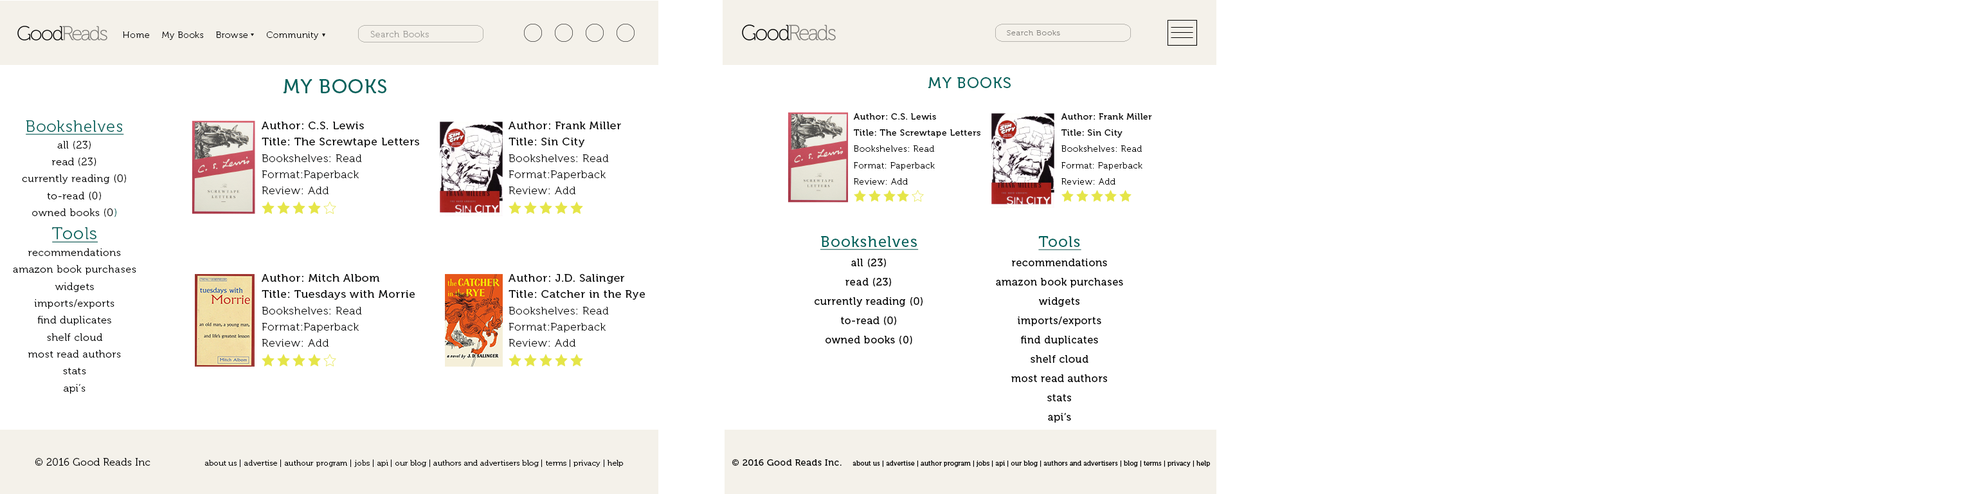
<style>
.page{position:relative;width:1975px;height:494px;background:#ffffff}
.page>*{position:absolute;margin:0}
.t1{font:9px "Museo-100";letter-spacing:0.05em;color:#000000}
.t2{font:9px "Museo-100";letter-spacing:0.05em;color:#9b9995}
.t3{font:7.2px "Museo-100";letter-spacing:0.05em;color:#84827e;scale:1.14 1}
.t4{font:15.4px "Museo-500";letter-spacing:0.05em;color:#00635d}
.t5{font:19.3px "Museo-500";letter-spacing:0.05em;color:#00635d}
.t6{font:8.9px/16.3px "Museo-500";letter-spacing:0.05em;color:#000000}
.t7{font:8.9px/16.3px "Museo-100";letter-spacing:0.05em;color:#000000}
.t8{font:10.1px/16.9px "Museo-300";letter-spacing:0.05em;color:#000000}
.t9{font:15.8px/24.8px "Museo-300";letter-spacing:0.05em;color:#00635d;text-decoration:underline}
.t10{font:10.1px/16.9px "Museo-300";letter-spacing:0.05em;color:#00635d}
.t11{font:11px/16.1px "Museo-500";letter-spacing:0.05em;color:#000101}
.t12{font:11px/16.1px "Museo-100";letter-spacing:0.05em;color:#000101}
.t13{font:11px/16.1px "Museo-100";letter-spacing:0.05em;color:#000000}
.t14{font:11px/16.1px "Museo-500";letter-spacing:0.05em;color:#000000}
.t15{font:10.1px/16.9px "Museo-300";letter-spacing:0.05em;color:#000101}
.t16{font:16.9px/24.8px "Museo-300";letter-spacing:0.05em;color:#00635d;text-decoration:underline}
.t17{font:10.3px/19.3px "Museo-500";letter-spacing:0.05em;color:#000000}
.t18{font:15.4px/28.3px "Museo-500";letter-spacing:0.05em;color:#00635d;text-decoration:underline}
.t19{font:7.7px "Museo-300";letter-spacing:0.025em;color:#000000}
.t20{font:10.3px "Museo-300";letter-spacing:0.025em;color:#000000}
.t21{font:9px "Museo-500";letter-spacing:0.05em;color:#000000}
.t22{font:6.4px "Museo-500";letter-spacing:0.025em;color:#000000}
</style>
<div class="page">
<p class="t1" style="left:123px;top:32px;width:27px;height:6px">Home</p>
<p class="t1" style="left:161px;top:32px;width:43px;height:8px">My Books</p>
<p class="t1" style="left:216px;top:32px;width:32px;height:6px">Browse</p>
<p class="t1" style="left:266px;top:32px;width:53px;height:8px">Community</p>
<p class="t2" style="left:370px;top:31px;width:59px;height:6px">Search Books</p>
<p class="t3" style="left:1007px;top:30px;width:53px;height:5px">Search Books</p>
<p class="t4" style="left:928px;top:77px;width:83px;height:11px">MY BOOKS</p>
<p class="t5" style="left:284px;top:79px;width:102px;height:14px">MY BOOKS</p>
<p class="t6" style="left:853px;top:113px;width:127px;height:71px">Author: C.S. Lewis<br>Title: The Screwtape Letters<br><span class="t7">Bookshelves: Read<br>Format: Paperback<br>Review: Add</span></p>
<p class="t7" style="left:1061px;top:113px;width:91px;height:71px"><span class="t6">Author: Frank Miller<br>Title: Sin City<br></span>Bookshelves: Read<br>Format: Paperback<br>Review: Add</p>
<p class="t8" style="left:22px;top:120px;width:104px;height:97px;text-align:center"><span class="t9">Bookshelves<br></span>all (23)<br>read (23)<br>currently reading (0)<br>to-read (0)<br>owned books (0<span class="t10">)</span></p>
<p class="t11" style="left:262px;top:122px;width:157px;height:72px">Author: C.S. Lewis<br>Title: The Screwtape Letters<br><span class="t12">Bookshelves: Read<br>Format:Paperback<br>Review: Add</span></p>
<p class="t13" style="left:509px;top:122px;width:112px;height:72px"><span class="t14">Author: Frank Miller<br>Title: Sin City<br></span>Bookshelves: Read<br>Format:Paperback<br>Review: Add</p>
<p class="t15" style="left:13px;top:227px;width:123px;height:166px;text-align:center"><span class="t16">Tools<br></span>recommendations<br>amazon book purchases<br>widgets<br>imports/exports<br>find duplicates<br>shelf cloud<br>most read authors<br>stats<br>api’s</p>
<p class="t17" style="left:815px;top:236px;width:108px;height:109px;text-align:center"><span class="t18">Bookshelves<br></span>all (23)<br>read (23)<br>currently reading (0)<br>to-read (0)<br>owned books (0)</p>
<p class="t17" style="left:996px;top:236px;width:127px;height:186px;text-align:center"><span class="t18">Tools<br></span>recommendations<br>amazon book purchases<br>widgets<br>imports/exports<br>find duplicates<br>shelf cloud<br>most read authors<br>stats<br>api’s</p>
<p class="t11" style="left:262px;top:274px;width:153px;height:72px">Author: Mitch Albom<br>Title: Tuesdays with Morrie<br><span class="t12">Bookshelves: Read<br>Format:Paperback<br>Review: Add</span></p>
<p class="t14" style="left:509px;top:274px;width:136px;height:72px">Author: J.D. Salinger<br>Title: Catcher in the Rye<br><span class="t13">Bookshelves: Read<br>Format:Paperback<br>Review: Add</span></p>
<p class="t19" style="left:35px;top:458px;width:589px;height:9px"><span class="t20">© 2016 Good Reads Inc                 </span> about us | advertise | authour program | jobs | api | our blog | authors and advertisers blog | terms | privacy | help</p>
<p class="t21" style="left:732px;top:459px;width:110px;height:6px">© 2016 Good Reads Inc.</p>
<p class="t22" style="left:852px;top:460px;width:358px;height:7px">about us | advertise | author program | jobs | api | our blog | authors and advertisers | blog | terms | privacy | help</p>
</div>
